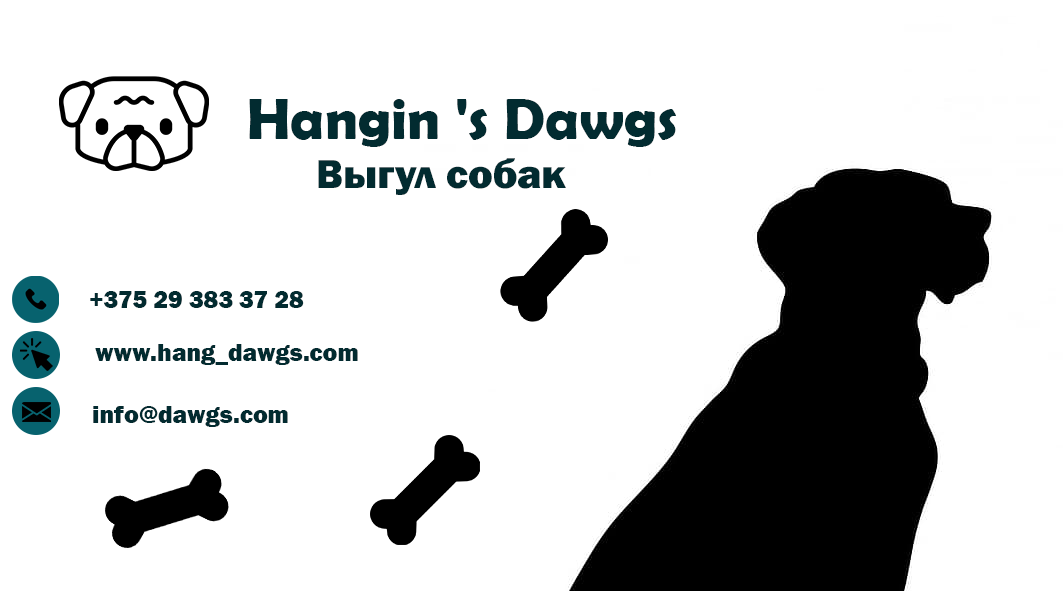
<style>
.page{position:relative;width:1063px;height:591px;background:#ffffff}
.page>*{position:absolute;margin:0}
.t1{font:58.3px "BerlinSansFBDemi-Bold";color:#022b30}
.t2{font:41.7px "FranklinGothic-Heavy";color:#022b30}
.t3{font:25px "FranklinGothic-Heavy";color:#022b30}
</style>
<div class="page">
<p class="t1" style="left:249px;top:99px;width:427px;height:48px">Hangin 's Dawgs</p>
<p class="t2" style="left:318px;top:158px;width:248px;height:37px">Выгул собак</p>
<p class="t3" style="left:90px;top:291px;width:214px;height:17px">+375 29 383 37 28</p>
<p class="t3" style="left:95px;top:344px;width:263px;height:21px">www.hang_dawgs.com</p>
<p class="t3" style="left:93px;top:406px;width:195px;height:21px">info@dawgs.com</p>
</div>
